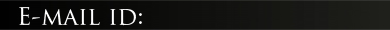
<style>
.page{position:relative;width:390px;height:30px}
.page>*{position:absolute;margin:0}
.t1{font:24px "TrajanPro-Regular";color:#ffffff}
</style>
<div class="page">
<p class="t1" style="left:19px;top:7px;width:123px;height:19px">E-mail id:</p>
</div>
